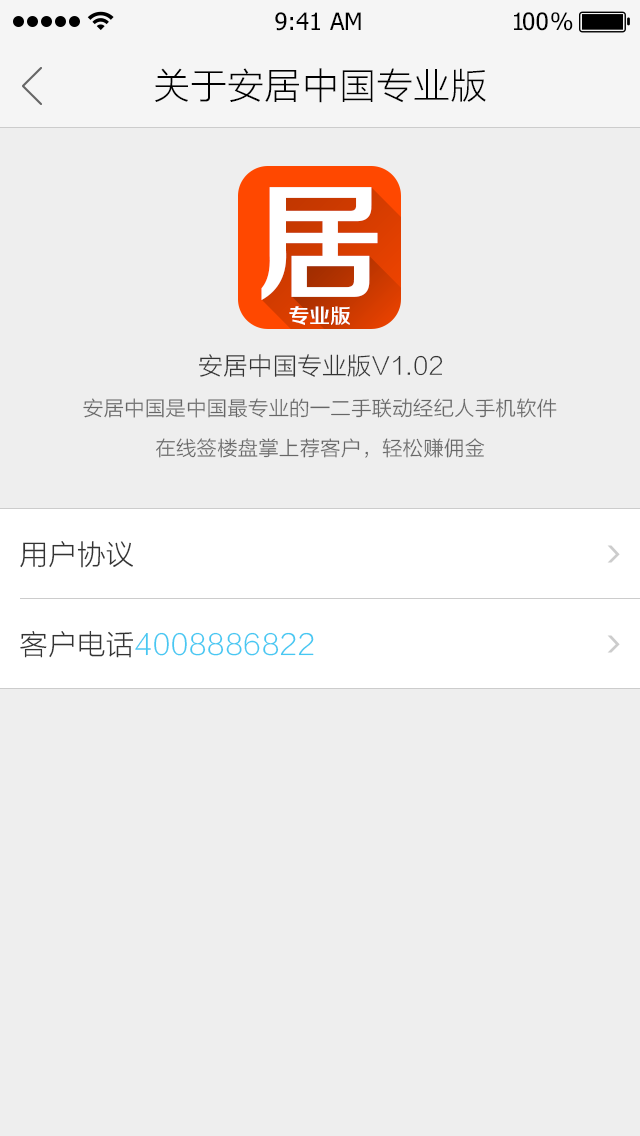
<style>
.page{position:relative;width:640px;height:1136px;background:#eeeeee}
.page>*{position:absolute;margin:0}
.t1{font:24px "Tahoma";color:#000000}
.t2{font:24px "Tahoma";letter-spacing:-0.1em;color:#000000}
.t3{font:24px "Tahoma";letter-spacing:-0.25em;color:#000000}
.t4{font:36px "STHeitiSC-Light";color:#000000}
.t5{font:130.3px "FZZZHONGJW--GB1-0";color:#ffffff}
.t6{font:20.8px "FZZZHONGJW--GB1-0";color:#ffffff}
.t7{font:24px "STHeitiSC-Light";color:#333333}
.t8{font:20px/40px "STHeitiSC-Light";color:#666666}
.t9{font:28px "STHeitiSC-Light";color:#333333}
.t10{font:28px "STHeitiSC-Light";color:#47c8f2}
</style>
<div class="page">
<p class="t1" style="left:275px;top:12px;width:86px;height:19px">9:41 AM</p>
<p class="t2" style="left:514px;top:12px;width:59px;height:19px">1<span class="t1">0</span><span class="t3">0 </span>%</p>
<p class="t4" style="left:155px;top:68px;width:331px;height:35px">关于安居中国专业版</p>
<p class="t5" style="left:261px;top:187px;width:117px;height:113px">居</p>
<p class="t6" style="left:289px;top:306px;width:61px;height:19px">专业版</p>
<p class="t7" style="left:199px;top:354px;width:244px;height:23px">安居中国专业版V1.02</p>
<p class="t8" style="left:83px;top:398px;width:474px;height:60px;text-align:center">安居中国是中国最专业的一二手联动经纪人手机软件<br>在线签楼盘掌上荐客户，轻松赚佣金</p>
<p class="t9" style="left:20px;top:541px;width:113px;height:27px">用户协议</p>
<p class="t10" style="left:20px;top:630px;width:294px;height:28px"><span class="t9">客户电话</span>4008886822</p>
</div>
